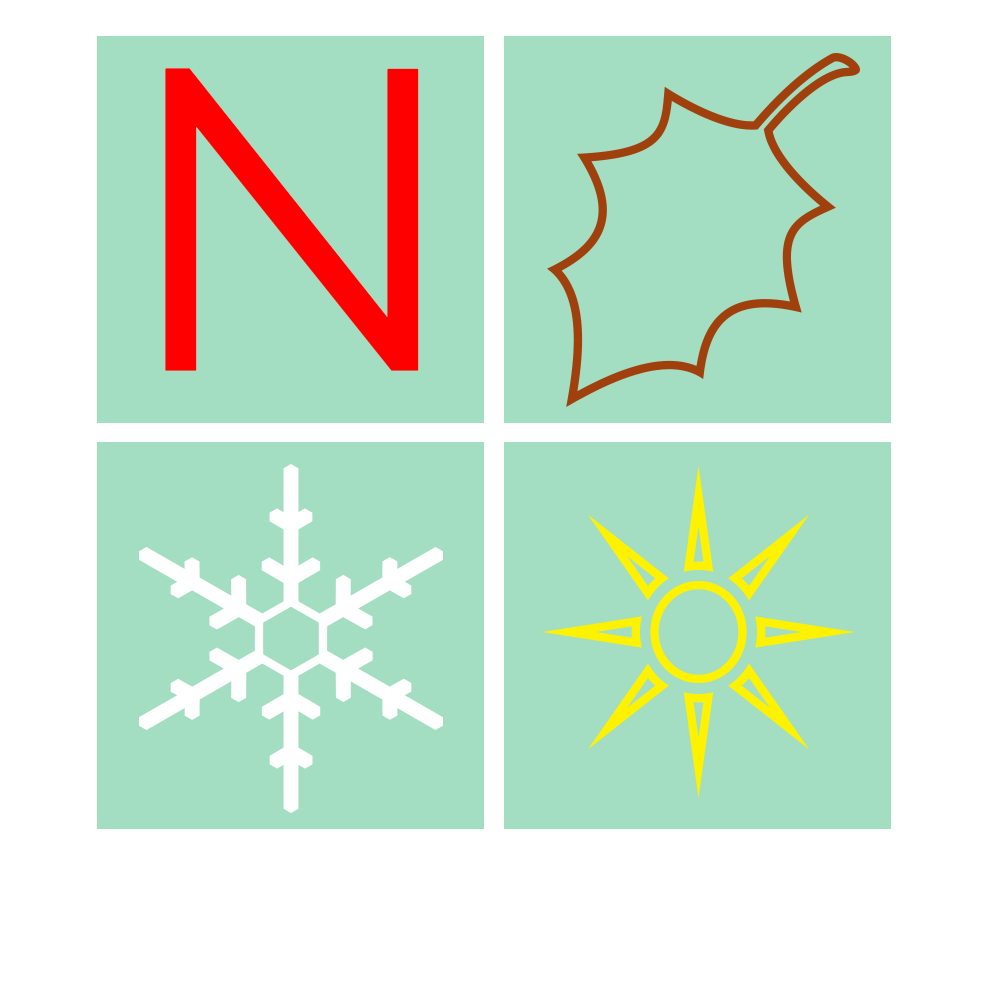
<style>
.page{position:relative;width:1000px;height:1000px;background:#a3ddc2}
.page>*{position:absolute;margin:0}
.t1{font:423.7px "Raleway";color:#ff0000;text-transform:uppercase;font-weight:bold}
</style>
<div class="page">
<p class="t1" style="left:165px;top:68px;width:254px;height:303px">n</p>
</div>
